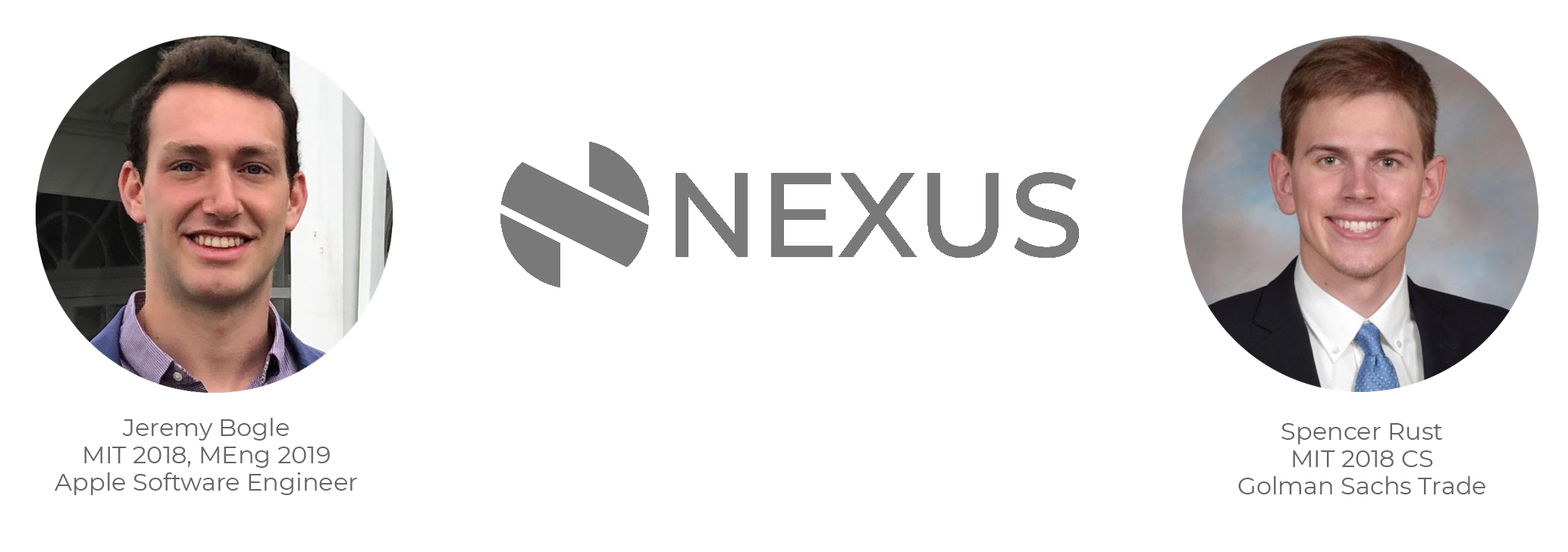
<style>
.page{position:relative;width:1568px;height:552px;background:#ffffff}
.page>*{position:absolute;margin:0}
.t1{font:24.3px/13.6px "Montserrat-Regular";color:#646464}
</style>
<div class="page">
<p class="t1" style="left:55px;top:418px;width:302px;height:77px;text-align:center">Jeremy Bogle<br><br>MIT 2018, MEng 2019<br><br>Apple Software Engineer</p>
<p class="t1" style="left:1238px;top:423px;width:247px;height:71px;text-align:center">Spencer Rust<br><br>MIT 2018 CS<br><br>Golman Sachs Trade</p>
</div>
